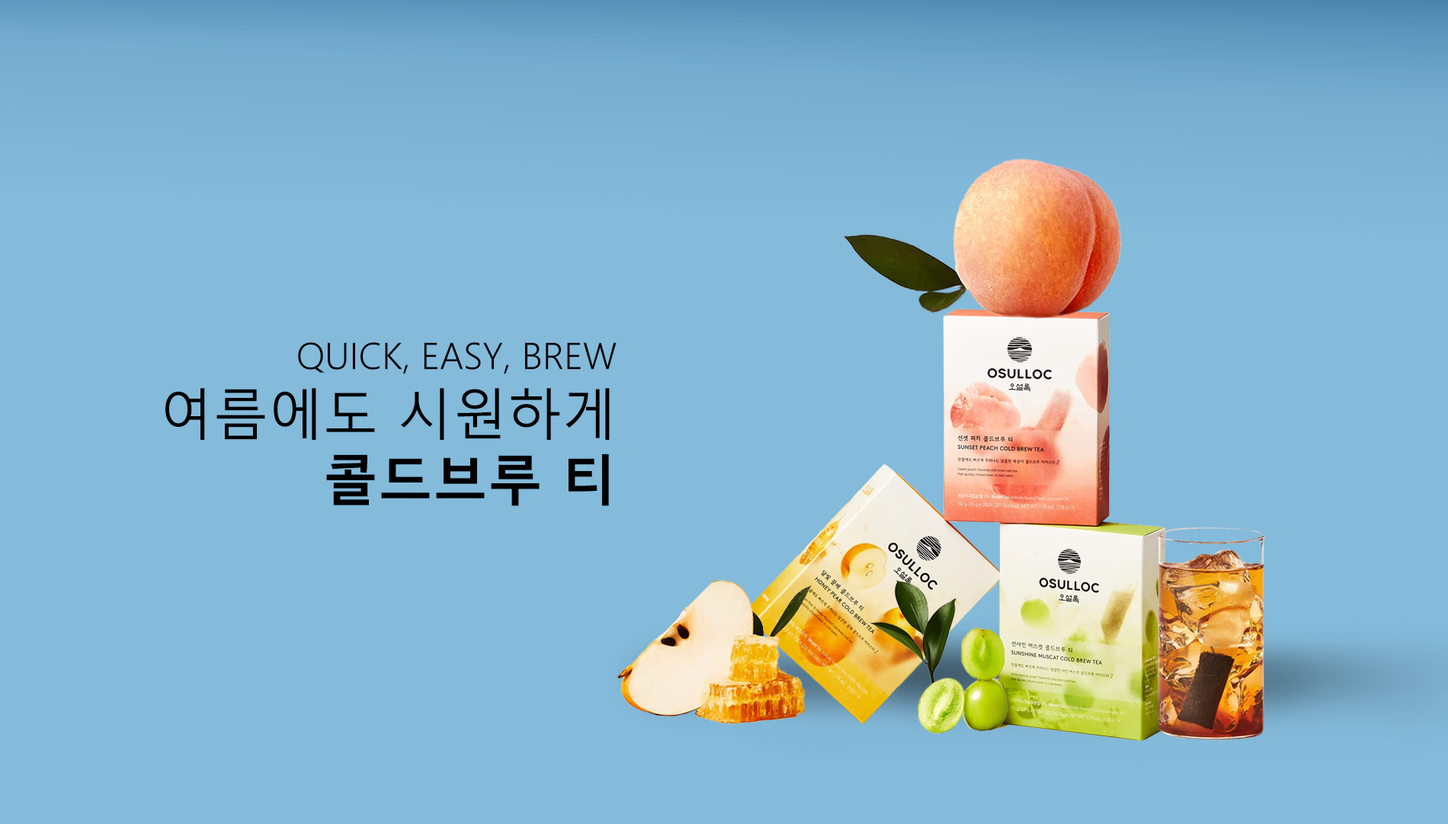
<style>
.page{position:relative;width:1448px;height:824px;background:#84bada}
.page>*{position:absolute;margin:0}
.t1{font:36.6px "MalgunGothic-Semilight";color:#000000}
.t2{font:54.9px "MalgunGothic";color:#000000}
.t3{font:54.9px "MalgunGothicBold";color:#000000}
</style>
<div class="page">
<p class="t1" style="left:165px;top:342px;width:451px;height:164px;text-align:right">QUICK, EASY, BREW<br><span class="t2">여름에도 시원하게<br></span><span class="t3">콜드브루 티</span></p>
</div>
